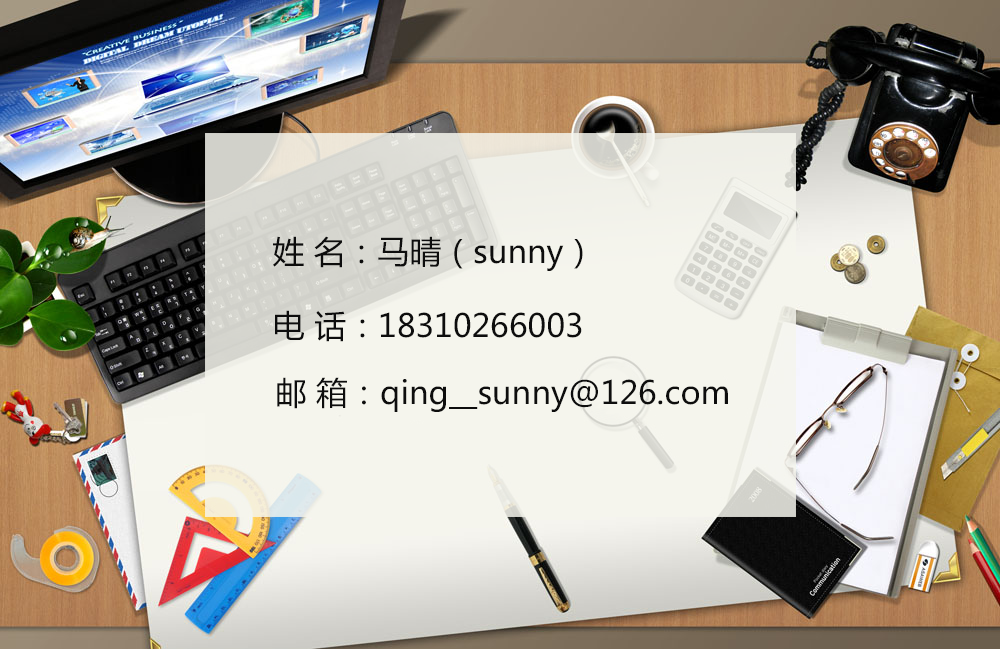
<style>
.page{position:relative;width:1000px;height:649px}
.page>*{position:absolute;margin:0}
.t1{font:31.9px "MicrosoftYaHei";color:#0d0d0d}
</style>
<div class="page">
<p class="t1" style="left:273px;top:236px;width:310px;height:35px">姓 名：马晴（sunny）</p>
<p class="t1" style="left:275px;top:310px;width:307px;height:32px">电 话：18310266003</p>
<p class="t1" style="left:277px;top:377px;width:451px;height:35px">邮 箱：qing__sunny@126.com</p>
</div>
